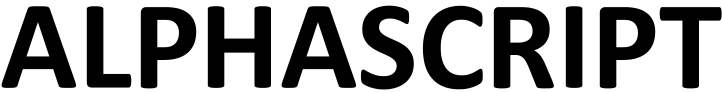
<style>
.page{position:relative;width:722px;height:92px;background:#ffffff}
.page>*{position:absolute;margin:0}
.t1{font:127.7px "Calibri-Bold";color:#000000}
</style>
<div class="page">
<p class="t1" style="left:1px;top:5px;width:721px;height:85px">ALPHASCRIPT</p>
</div>
